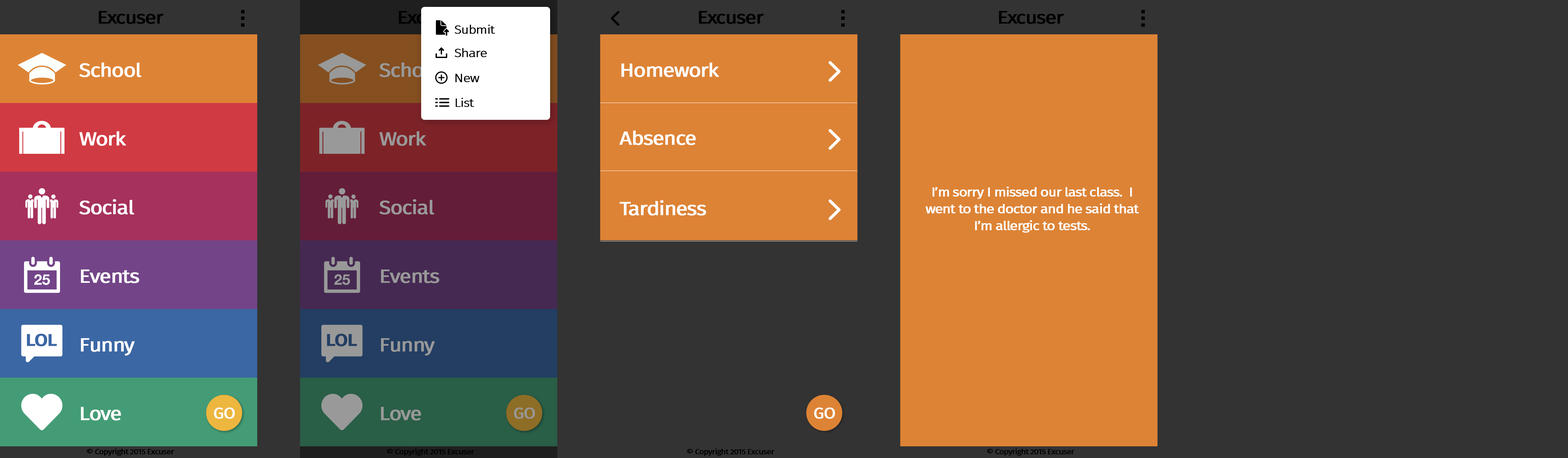
<style>
.page{position:relative;width:1568px;height:458px;background:#333333}
.page>*{position:absolute;margin:0}
.t1{font:17.8px "FiraSans-Regular";letter-spacing:-0.06em;color:#000000;font-weight:bold;scale:1.14 1}
.t2{font:11.8px "FiraSans-Light";letter-spacing:-0.06em;color:#000000;font-weight:bold;scale:1.14 1}
.t3{font:18.8px "FiraSans-Regular";letter-spacing:-0.06em;color:#ffffff;font-weight:bold;scale:1.14 1}
.t4{font:18.8px "FiraSans-Regular";letter-spacing:-0.06em;font-weight:bold;scale:1.14 1}
.t5{font:18.8px "FiraSans-Regular";letter-spacing:-0.06em;color:#999999;font-weight:bold;scale:1.14 1}
.t6{font:12.5px/16.9px "FiraSans-Regular";letter-spacing:-0.06em;color:#ffffff;font-weight:bold;scale:1.14 1}
.t7{font:16.8px "FiraSans-Medium";letter-spacing:-0.06em;color:#3b67a4;font-weight:bold;scale:1.14 1}
.t8{font:16.8px "FiraSans-Medium";letter-spacing:-0.06em;color:#233e62;font-weight:bold;scale:1.14 1}
.t9{font:14.9px "FiraSans-Regular";letter-spacing:-0.06em;color:#ffffff;font-weight:bold;scale:1.14 1}
.t10{font:14.9px "FiraSans-Regular";letter-spacing:-0.06em;color:#999999;font-weight:bold;scale:1.14 1}
.t11{font:7.2px "FiraSans-Regular";letter-spacing:-0.06em;color:#000000;font-weight:bold;scale:1.14 1}
</style>
<div class="page">
<p class="t1" style="left:99px;top:11px;width:65px;height:13px">Excuser</p>
<p class="t1" style="left:699px;top:11px;width:65px;height:13px">Excuser</p>
<p class="t1" style="left:999px;top:11px;width:65px;height:13px">Excuser</p>
<p class="t2" style="left:454px;top:25px;width:41px;height:9px">Submit</p>
<p class="t2" style="left:454px;top:48px;width:33px;height:9px">Share</p>
<p class="t3" style="left:79px;top:62px;width:63px;height:15px">School</p>
<p class="t4" style="left:379px;top:62px;width:63px;height:15px">School</p>
<p class="t3" style="left:621px;top:62px;width:98px;height:15px">Homework</p>
<p class="t2" style="left:455px;top:74px;width:24px;height:8px">New</p>
<p class="t2" style="left:455px;top:98px;width:19px;height:9px">List</p>
<p class="t3" style="left:79px;top:131px;width:47px;height:15px">Work</p>
<p class="t5" style="left:379px;top:131px;width:47px;height:15px">Work</p>
<p class="t3" style="left:619px;top:130px;width:77px;height:15px">Absence</p>
<p class="t6" style="left:925px;top:186px;width:214px;height:47px;text-align:center">I’m sorry I missed our last class.  I went to the doctor and he said that I’m allergic to tests.</p>
<p class="t3" style="left:79px;top:199px;width:55px;height:15px">Social</p>
<p class="t5" style="left:379px;top:199px;width:56px;height:15px">Social</p>
<p class="t3" style="left:619px;top:200px;width:87px;height:15px">Tardiness</p>
<p class="t3" style="left:81px;top:269px;width:58px;height:14px">Events</p>
<p class="t5" style="left:381px;top:269px;width:58px;height:14px">Events</p>
<p class="t7" style="left:27px;top:333px;width:30px;height:13px">LOL</p>
<p class="t3" style="left:81px;top:338px;width:54px;height:17px">Funny</p>
<p class="t8" style="left:327px;top:333px;width:30px;height:13px">LOL</p>
<p class="t5" style="left:381px;top:338px;width:54px;height:17px">Funny</p>
<p class="t3" style="left:81px;top:406px;width:40px;height:14px">Love</p>
<p class="t9" style="left:214px;top:407px;width:21px;height:11px">GO</p>
<p class="t5" style="left:381px;top:406px;width:40px;height:14px">Love</p>
<p class="t10" style="left:514px;top:407px;width:21px;height:11px">GO</p>
<p class="t9" style="left:814px;top:407px;width:21px;height:11px">GO</p>
<p class="t11" style="left:87px;top:448px;width:87px;height:7px">© Copyright 2015 Excuser</p>
<p class="t11" style="left:387px;top:448px;width:87px;height:7px">© Copyright 2015 Excuser</p>
<p class="t11" style="left:687px;top:448px;width:87px;height:7px">© Copyright 2015 Excuser</p>
<p class="t11" style="left:987px;top:448px;width:87px;height:7px">© Copyright 2015 Excuser</p>
</div>
